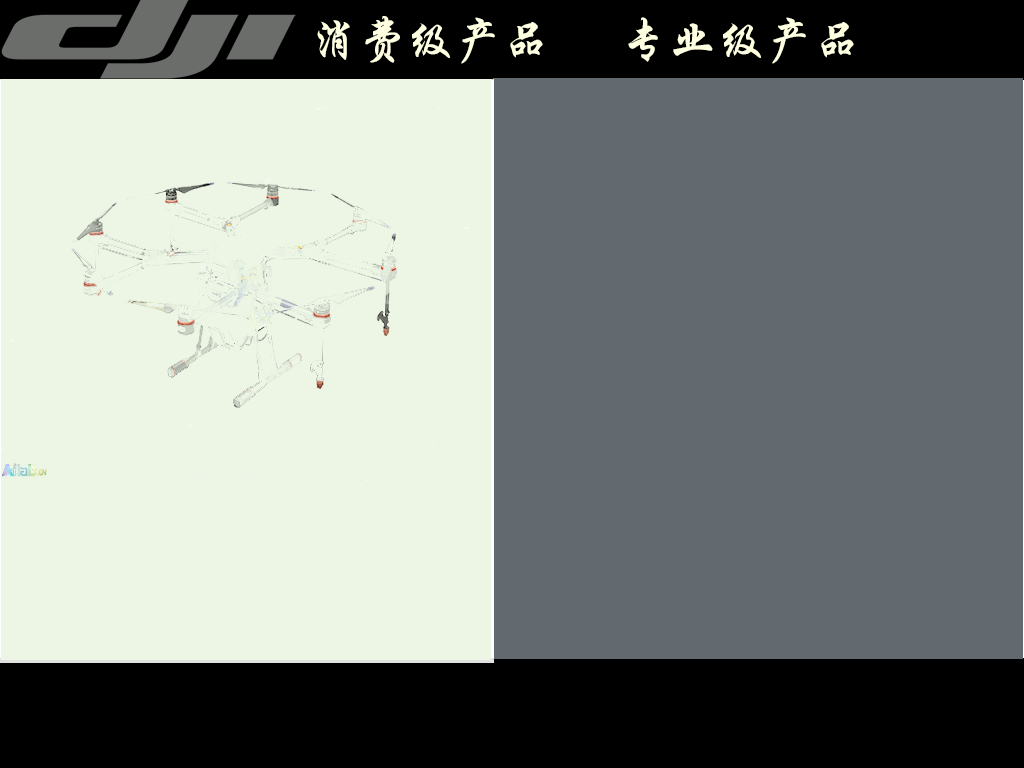
<style>
.page{position:relative;width:1024px;height:768px;background:#62696f}
.page>*{position:absolute;margin:0}
.t1{font:48px "STXingkai";color:#ffffe1}
</style>
<div class="page">
<p class="t1" style="left:317px;top:16px;width:537px;height:48px">消费级产品      专业级产品</p>
</div>
